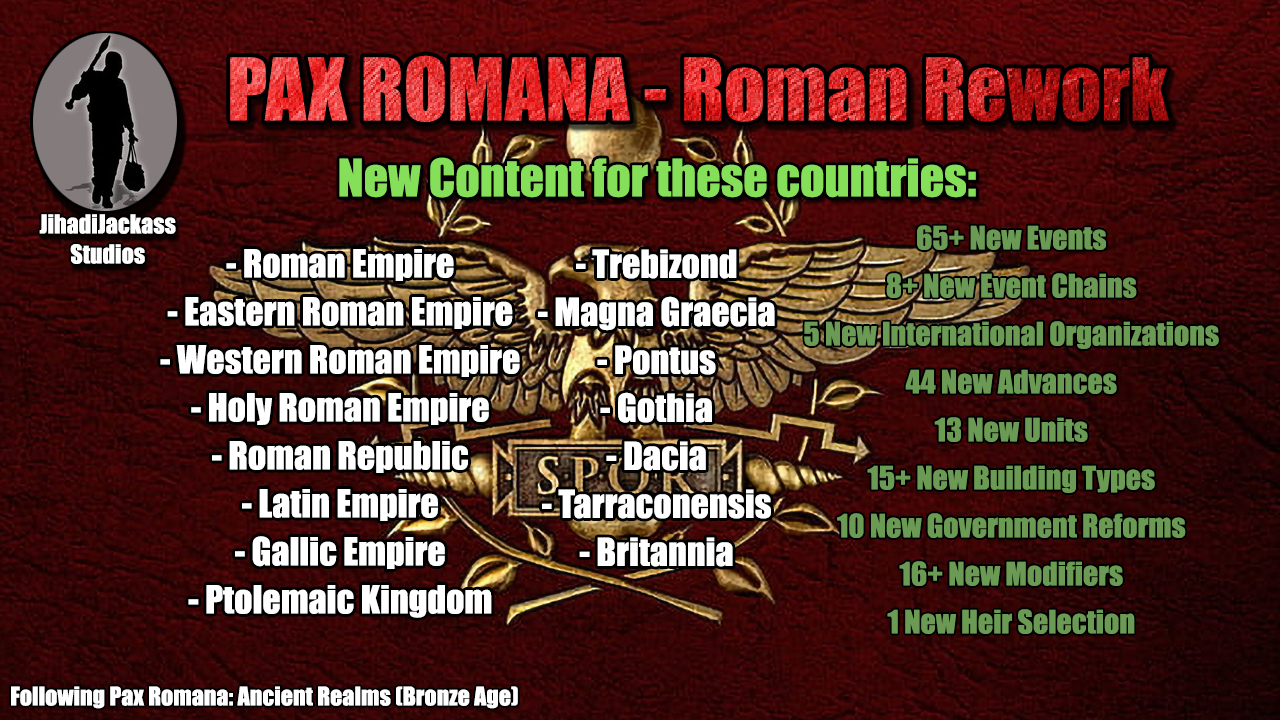
<style>
.page{position:relative;width:1280px;height:720px}
.page>*{position:absolute;margin:0}
.t1{font:48px "Impact";color:#86df59}
.t2{font:30px/48px "Impact";color:#6b9a54}
.t3{font:36px/48px "Impact";color:#ffffff}
.t4{font:80px/48px "Impact";color:#ffffff}
.t5{font:24px "Impact";color:#ffffff}
</style>
<div class="page">
<p class="t1" style="left:339px;top:157px;width:637px;height:41px">New Content for these countries:</p>
<p class="t2" style="left:804px;top:225px;width:415px;height:409px;text-align:center">65+ New Events<br>8+ New Event Chains<br>5 New International Organizations<br>44 New Advances<br>13 New Units<br>15+ New Building Types<br>10 New Government Reforms<br>16+ New Modifiers<br>1 New Heir Selection</p>
<p class="t3" style="left:160px;top:249px;width:360px;height:369px;text-align:center"><span class="t4"><br></span>- Roman Empire<br>- Eastern Roman Empire<br>- Western Roman Empire<br>- Holy Roman Empire<br>- Roman Republic<br>- Latin Empire<br>- Gallic Empire<br>- Ptolemaic Kingdom</p>
<p class="t3" style="left:538px;top:249px;width:237px;height:318px;text-align:center">- Trebizond<br>- Magna Graecia<br>- Pontus<br>- Gothia<br>- Dacia<br>- Tarraconensis<br>- Britannia</p>
<p class="t5" style="left:11px;top:686px;width:507px;height:23px">Following Pax Romana: Ancient Realms (Bronze Age)</p>
</div>
